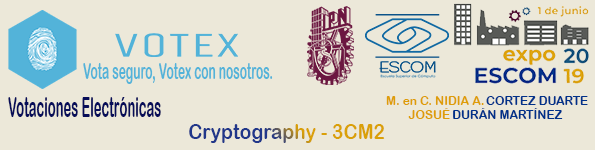
<style>
.page{position:relative;width:595px;height:150px;background:#ece8d9}
.page>*{position:absolute;margin:0}
.t1{font:22.8px "ArialRoundedMTBold";color:#53b3d9;scale:0.53 1}
.t2{font:27.9px "ArialRoundedMTBold";color:#070d59;scale:0.47 1}
.t3{font:11.8px "ArialRoundedMTBold";color:#de9d07}
.t4{font:11.8px "ArialRoundedMTBold";color:#003189}
.t5{font:21.5px "ArialRoundedMTBold";scale:0.89 1}
</style>
<div class="page">
<p class="t1" style="left:83px;top:63px;width:190px;height:21px">Vota seguro, Votex con nosotros.</p>
<p class="t2" style="left:8px;top:97px;width:153px;height:20px">Votaciones Electrónicas</p>
<p class="t3" style="left:386px;top:96px;width:98px;height:23px;text-align:center">M. en C. NIDIA A.                                  <br>JOSUÉ</p>
<p class="t4" style="left:453px;top:96px;width:135px;height:23px;text-align:center">CORTEZ DUARTE<br>               DURÁN MARTÍNEZ</p>
<p class="t5" style="left:189px;top:124px;width:196px;height:19px">Cryptography - 3CM2</p>
</div>
